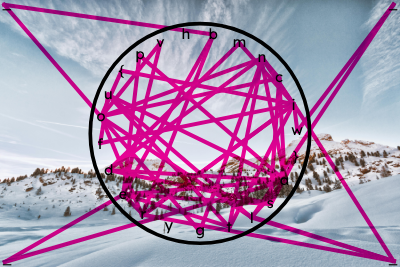
<style>
.page{position:relative;width:400px;height:267px}
.page>*{position:absolute;margin:0}
.t1{font:14.6px "LexendDeca-Regular"}
.t2{font:14.6px "LexendDeca-Regular";color:#000000}
</style>
<div class="page">
<p class="t1" style="left:2px;top:9px;width:10px;height:2px">_</p>
<p class="t1" style="left:388px;top:9px;width:10px;height:2px">_</p>
<p class="t2" style="left:182px;top:28px;width:8px;height:11px">h</p>
<p class="t2" style="left:209px;top:28px;width:9px;height:12px">b</p>
<p class="t2" style="left:156px;top:39px;width:9px;height:8px">v</p>
<p class="t2" style="left:233px;top:39px;width:13px;height:8px">m</p>
<p class="t2" style="left:136px;top:51px;width:8px;height:12px">p</p>
<p class="t2" style="left:258px;top:54px;width:8px;height:8px">n</p>
<p class="t2" style="left:118px;top:64px;width:6px;height:14px">{</p>
<p class="t2" style="left:275px;top:74px;width:8px;height:9px">c</p>
<p class="t2" style="left:104px;top:91px;width:8px;height:9px">u</p>
<p class="t2" style="left:292px;top:98px;width:3px;height:12px">i</p>
<p class="t2" style="left:97px;top:113px;width:8px;height:9px">o</p>
<p class="t2" style="left:291px;top:127px;width:12px;height:8px">w</p>
<p class="t2" style="left:98px;top:138px;width:6px;height:11px">f</p>
<p class="t2" style="left:293px;top:150px;width:6px;height:14px">}</p>
<p class="t2" style="left:104px;top:164px;width:9px;height:12px">d</p>
<p class="t2" style="left:280px;top:177px;width:9px;height:9px">a</p>
<p class="t2" style="left:119px;top:191px;width:8px;height:9px">e</p>
<p class="t2" style="left:267px;top:200px;width:7px;height:9px">s</p>
<p class="t2" style="left:141px;top:211px;width:6px;height:8px">r</p>
<p class="t2" style="left:164px;top:222px;width:9px;height:12px">y</p>
<p class="t2" style="left:226px;top:222px;width:6px;height:10px">t</p>
<p class="t2" style="left:251px;top:212px;width:2px;height:11px">l</p>
<p class="t2" style="left:196px;top:227px;width:8px;height:12px">g</p>
<p class="t1" style="left:2px;top:264px;width:10px;height:2px">_</p>
<p class="t1" style="left:388px;top:264px;width:10px;height:2px">_</p>
</div>
